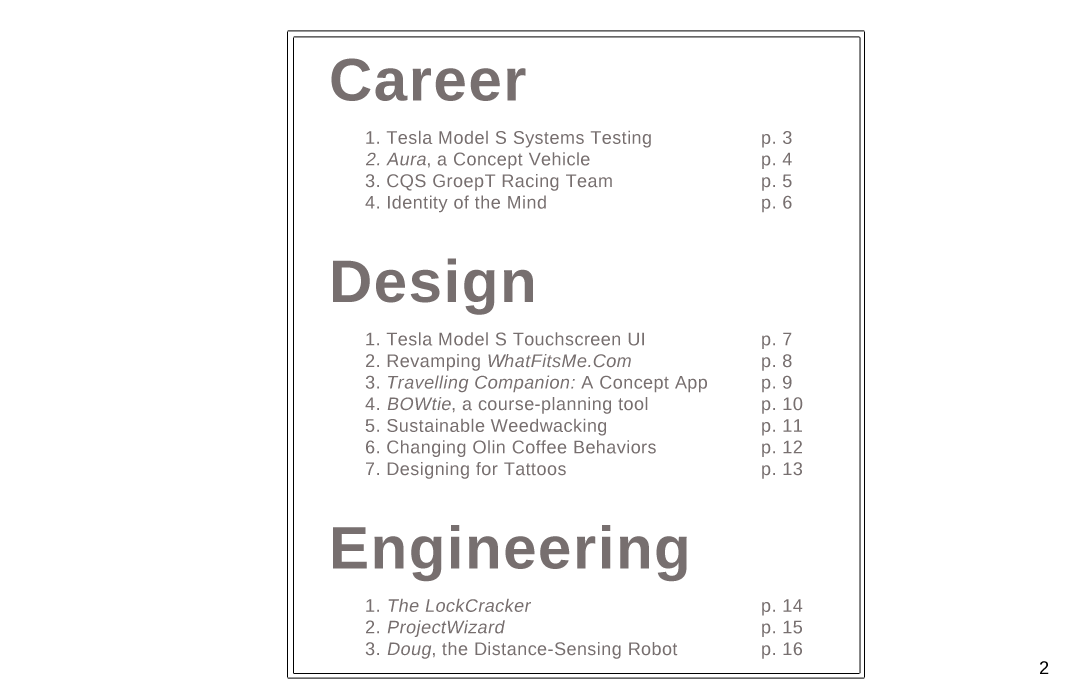
<style>
.page{position:relative;width:1080px;height:700px;background:#ffffff}
.page>*{position:absolute;margin:0}
.t1{font:18px "LiberationSans";letter-spacing:0.025em;color:#776f6f}
.t2{font:60px "LiberationSans-Bold";letter-spacing:0.025em;color:#776f6f}
.t3{font:18px "LiberationSans";letter-spacing:0.025em;color:#776f6f;font-style:italic}
.t4{font:18px "LiberationSans-Italic";letter-spacing:0.025em;color:#776f6f}
.t5{font:18px "LiberationSans";letter-spacing:0.025em;color:#000000}
</style>
<div class="page">
<p class="t1" style="left:331px;top:58px;width:472px;height:601px;text-align:justify"><span class="t2">Career<br><br> </span>1. Tesla Model S Systems Testing    p. 3<br><span class="t3"> 2. Aura</span>, a Concept Vehicle     p. 4<br> 3. CQS GroepT Racing Team     p. 5<br> 4. Identity of the Mind      p. 6<br><br><span class="t2">Design<br><br> </span>1. Tesla Model S Touchscreen UI    p. 7<br> 2. Revamping <span class="t4">WhatFitsMe.Com</span>    p. 8 <br> 3. <span class="t4">Travelling Companion: </span>A Concept App  p. 9 <br> 4. <span class="t3">BOWtie</span>, a course-planning tool    p. 10<br> 5. Sustainable Weedwacking     p. 11<br> 6. Changing Olin Coffee Behaviors   p. 12<br> 7. Designing for Tattoos      p. 13<br><br><span class="t2">Engineering<br><br> </span>1. <span class="t3">The LockCracker       </span>p. 14<br> 2. <span class="t3">ProjectWizard        </span>p. 15<br> 3. <span class="t3">Doug</span>, the Distance-Sensing Robot   p. 16</p>
<p class="t5" style="left:1040px;top:661px;width:9px;height:13px">2</p>
</div>
